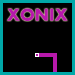
<style>
.page{position:relative;width:75px;height:75px;background:#000000}
.page>*{position:absolute;margin:0}
.t1{font:18px "Aharoni-Bold";color:#b719ab}
</style>
<div class="page">
<p class="t1" style="left:7px;top:8px;width:61px;height:13px">XONIX</p>
</div>
